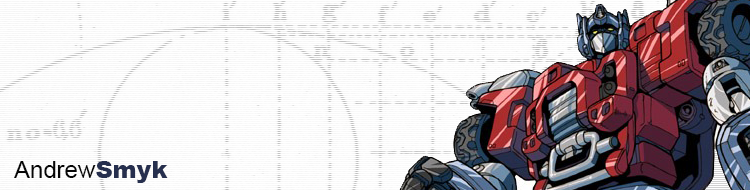
<style>
.page{position:relative;width:750px;height:190px;background:#ffffff}
.page>*{position:absolute;margin:0}
.t1{font:24px "ArialMT";color:#060606}
.t2{font:24px "Arial-Black";color:#262f4e}
</style>
<div class="page">
<p class="t1" style="left:14px;top:161px;width:154px;height:22px">Andrew<span class="t2">Smyk</span></p>
</div>
